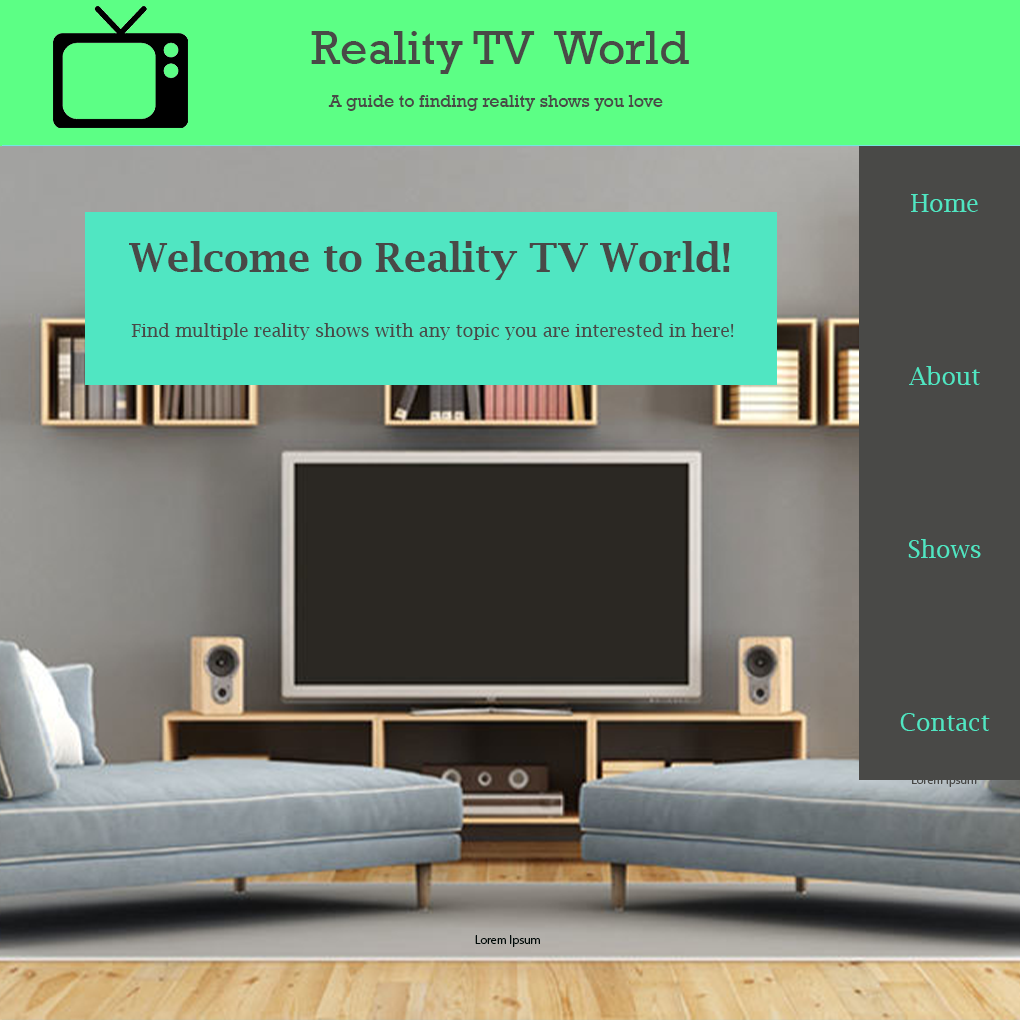
<style>
.page{position:relative;width:1020px;height:1020px}
.page>*{position:absolute;margin:0}
.t1{font:18px "Rockwell";color:#494947}
.t2{font:48px "Rockwell";color:#494947}
.t3{font:24px "LucidaBright";color:#50e6c2}
.t4{font:18px "LucidaBright";color:#494947}
.t5{font:40px "LucidaBright-Demi";color:#494947}
.t6{font:12px "MyriadPro-Regular";color:#494947}
.t7{font:12px "MyriadPro-Regular";color:#010b09}
</style>
<div class="page">
<p class="t1" style="left:311px;top:31px;width:378px;height:80px"><span class="t2">Reality TV  World<br></span><br>    A guide to finding reality shows you love</p>
<p class="t3" style="left:900px;top:194px;width:90px;height:537px;text-align:center">Home<br><br><br><br><br><br>About<br><br><br><br><br><br>Shows<br><br><br><br><br><br>Contact</p>
<p class="t4" style="left:129px;top:241px;width:605px;height:99px;text-align:center"><span class="t5">Welcome to Reality TV World!<br></span> <br><br> Find multiple reality shows with any topic you are interested in here!</p>
<p class="t6" style="left:912px;top:775px;width:65px;height:12px">Lorem Ipsum</p>
<p class="t7" style="left:475px;top:935px;width:65px;height:12px">Lorem Ipsum</p>
</div>
